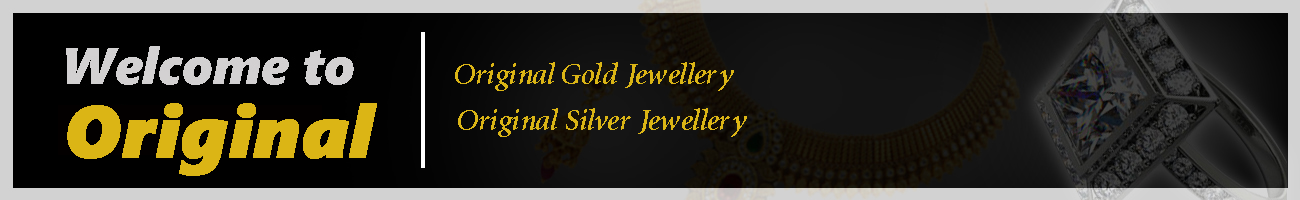
<style>
.page{position:relative;width:1300px;height:200px}
.page>*{position:absolute;margin:0}
.t1{font:30px "AtlantixSSKBoldItalic";color:#dbb515}
.t2{font:73.4px "SegoeUIBlack-Italic";color:#dbb515;font-weight:bold}
</style>
<div class="page">
<p class="t1" style="left:455px;top:62px;width:279px;height:29px">Original Gold Jewellery</p>
<p class="t2" style="left:67px;top:103px;width:310px;height:73px">Original</p>
<p class="t1" style="left:458px;top:108px;width:289px;height:29px">Original Silver Jewellery</p>
</div>
